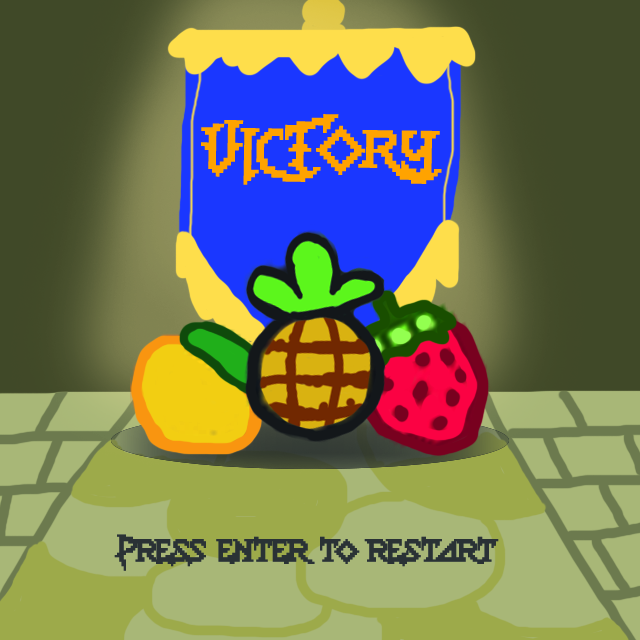
<style>
.page{position:relative;width:640px;height:640px}
.page>*{position:absolute;margin:0}
.t1{font:41.7px "Lady-Radical-2";letter-spacing:0.03em;color:#ffa300}
.t2{font:25px "Lady-Radical-2";letter-spacing:0.03em;color:#2a3235}
</style>
<div class="page">
<p class="t1" style="left:201px;top:114px;width:241px;height:71px;rotate:1deg">VICTORY</p>
<p class="t2" style="left:114px;top:534px;width:385px;height:37px">Press enter to restart</p>
</div>
